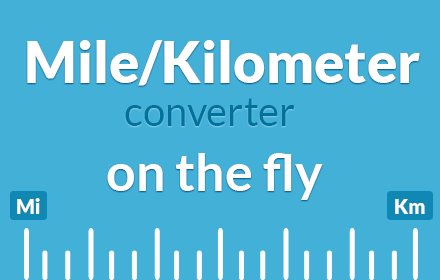
<style>
.page{position:relative;width:440px;height:280px;background:#43b0d8}
.page>*{position:absolute;margin:0}
.t1{font:56px "Lato-Black";color:#ffffff}
.t2{font:40px "Lato-Regular";color:#00729b}
.t3{font:52px "Lato-Bold";color:#ffffff}
.t4{font:20px "Lato-Black";color:#ffffff}
</style>
<div class="page">
<p class="t1" style="left:27px;top:40px;width:393px;height:46px">Mile/Kilometer</p>
<p class="t2" style="left:125px;top:98px;width:170px;height:28px">converter</p>
<p class="t3" style="left:107px;top:153px;width:216px;height:47px">on the fly</p>
<p class="t4" style="left:17px;top:198px;width:23px;height:16px">Mi</p>
<p class="t4" style="left:395px;top:199px;width:30px;height:15px">Km</p>
</div>
